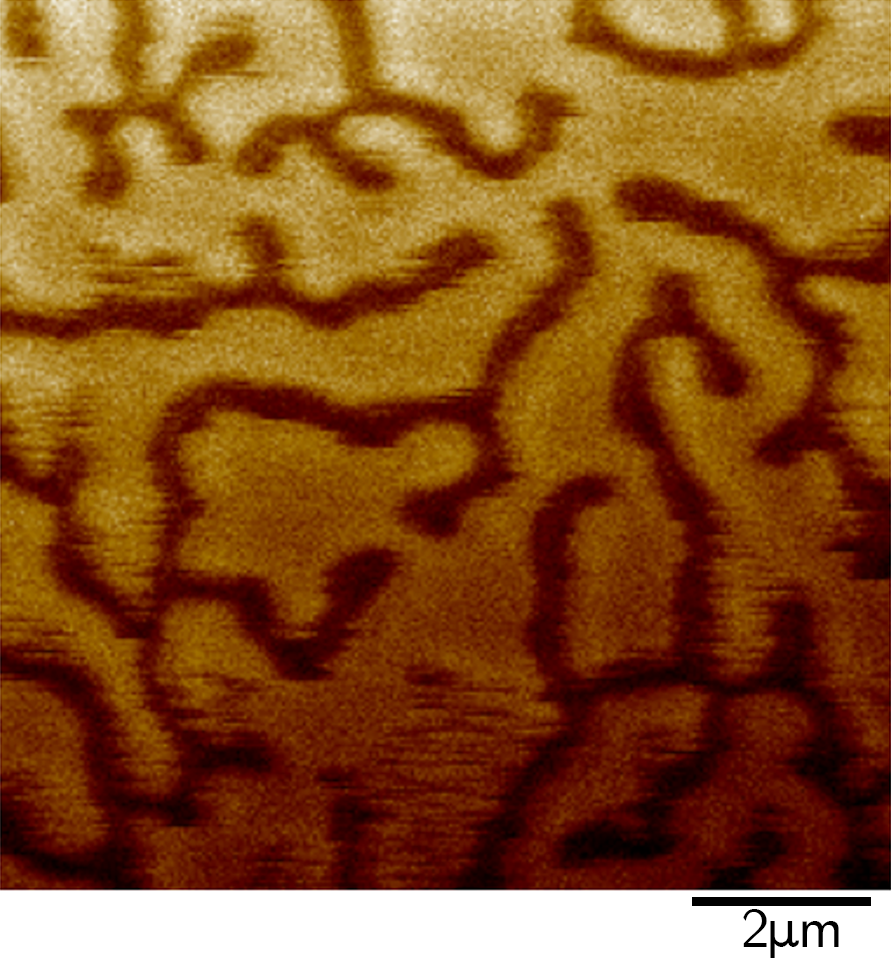
<style>
.page{position:relative;width:891px;height:959px}
.page>*{position:absolute;margin:0}
.t1{font:56.9px "CMUSansSerif";letter-spacing:-0.025em;color:#000000}
</style>
<div class="page">
<p class="t1" style="left:743px;top:909px;width:96px;height:49px">2μm</p>
</div>
